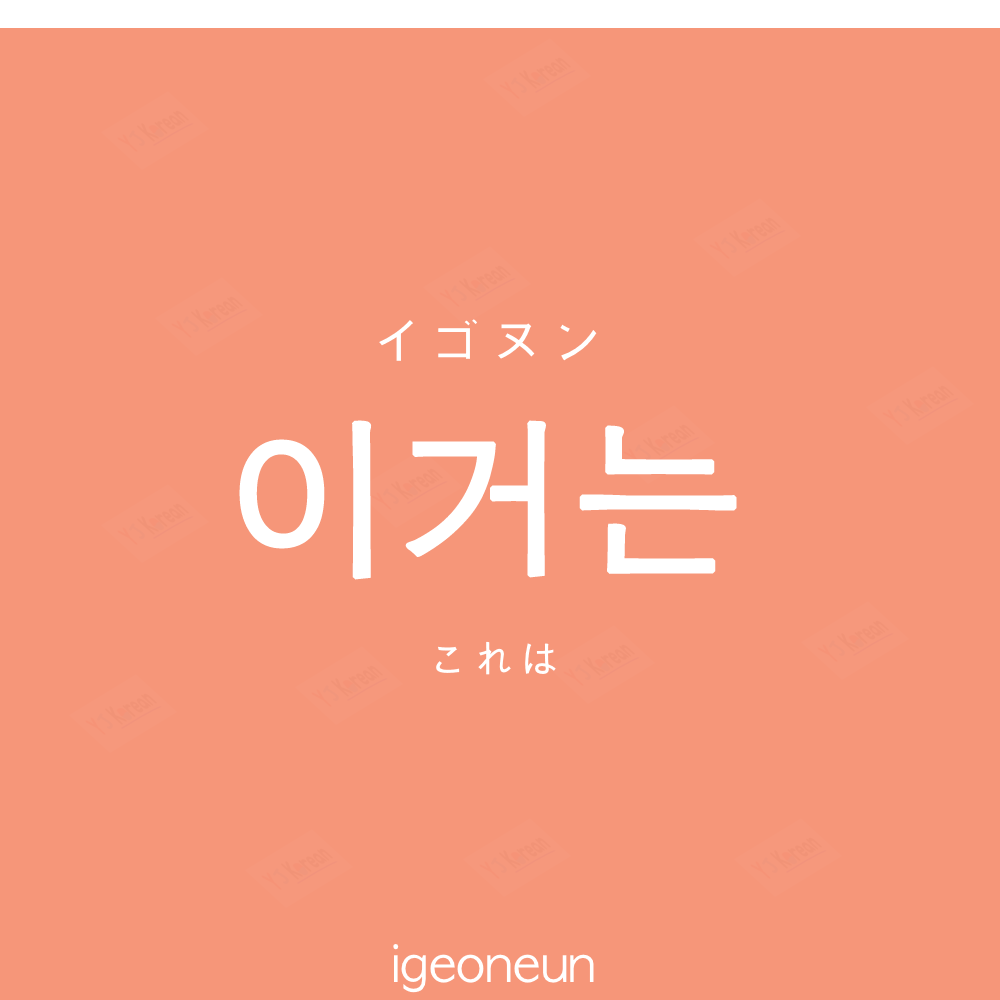
<style>
.page{position:relative;width:1000px;height:1000px;background:#f69679}
.page>*{position:absolute;margin:0}
.t1{font:60px "AppleGothic";color:#ffffff}
.t2{font:170px "AppleGothic";color:#ffffff;font-weight:bold}
.t3{font:45px "AppleGothic";color:#ffffff}
.t4{font:50px "AppleGothic";color:#ffffff}
</style>
<div class="page">
<p class="t1" style="left:379px;top:319px;width:218px;height:42px">イゴヌン</p>
<p class="t2" style="left:239px;top:420px;width:498px;height:160px">이거는</p>
<p class="t3" style="left:436px;top:641px;width:120px;height:34px">これは</p>
<p class="t4" style="left:393px;top:944px;width:201px;height:49px">igeoneun</p>
</div>
